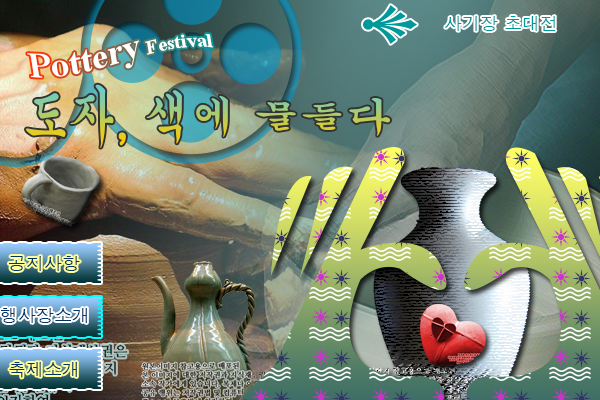
<style>
.page{position:relative;width:600px;height:400px}
.page>*{position:absolute;margin:0}
.t1{font:17.8px "Dotum";color:#009999}
.t2{font:20px "TimesNewRomanPS-BoldMT";color:#ffffff}
.t3{font:36.1px "TimesNewRomanPS-BoldMT";color:#ffffff}
.t4{font:46.5px "Gungsuh"}
.t5{font:17.9px "Dotum";color:#003366}
</style>
<div class="page">
<p class="t1" style="left:445px;top:16px;width:111px;height:15px">사기장 초대전</p>
<p class="t2" style="left:27px;top:34px;width:186px;height:44px;rotate:-9deg"><span class="t3">Pottery</span> Festival</p>
<p class="t4" style="left:26px;top:84px;width:364px;height:64px">도자, 색에 물들다</p>
<p class="t5" style="left:9px;top:256px;width:71px;height:15px">공지사항</p>
<p class="t5" style="left:1px;top:308px;width:86px;height:15px">행사장소개</p>
<p class="t5" style="left:9px;top:362px;width:68px;height:16px">축제소개</p>
</div>
